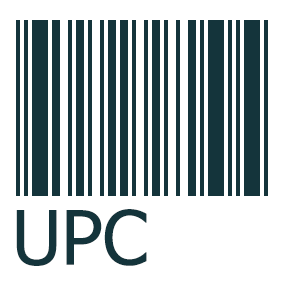
<style>
.page{position:relative;width:284px;height:284px;background:#ffffff}
.page>*{position:absolute;margin:0}
.t1{font:75px "Tahoma";color:#14343b}
</style>
<div class="page">
<p class="t1" style="left:16px;top:209px;width:131px;height:57px">UPC</p>
</div>
